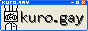
<style>
.page{position:relative;width:88px;height:31px;background:#ece9d8}
.page>*{position:absolute;margin:0}
.t1{font:16px "Consolas";letter-spacing:-0.08em;color:#000000}
.t2{font:16px "Consolas";letter-spacing:-0.08em;color:#5e5e5e}
</style>
<div class="page">
<p class="t1" style="left:21px;top:11px;width:62px;height:14px">kuro.gay</p>
<p class="t2" style="left:22px;top:12px;width:62px;height:14px">kuro.gay</p>
</div>
